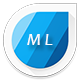
<style>
.page{position:relative;width:80px;height:80px;background:#ffffff}
.page>*{position:absolute;margin:0}
.t1{font:18px "Candara-Italic";color:#fefcfc}
</style>
<div class="page">
<p class="t1" style="left:27px;top:34px;width:26px;height:11px">M L</p>
</div>
